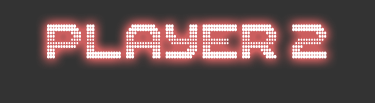
<style>
.page{position:relative;width:375px;height:103px;background:#333333}
.page>*{position:absolute;margin:0}
.t1{font:54.3px "The-2K12";color:#ffffff;scale:0.78 1}
</style>
<div class="page">
<p class="t1" style="left:47px;top:24px;width:280px;height:35px">PLAYER 2</p>
</div>
